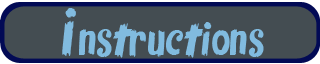
<style>
.page{position:relative;width:320px;height:64px;background:#444d52}
.page>*{position:absolute;margin:0}
.t1{font:93.7px "FantasticFont";color:#81bbe0}
.t2{font:89.6px "FantasticFont";color:#81bbe0}
</style>
<div class="page">
<p class="t1" style="left:62px;top:8px;width:202px;height:50px"><span class="t2">I</span>nstructions</p>
</div>
